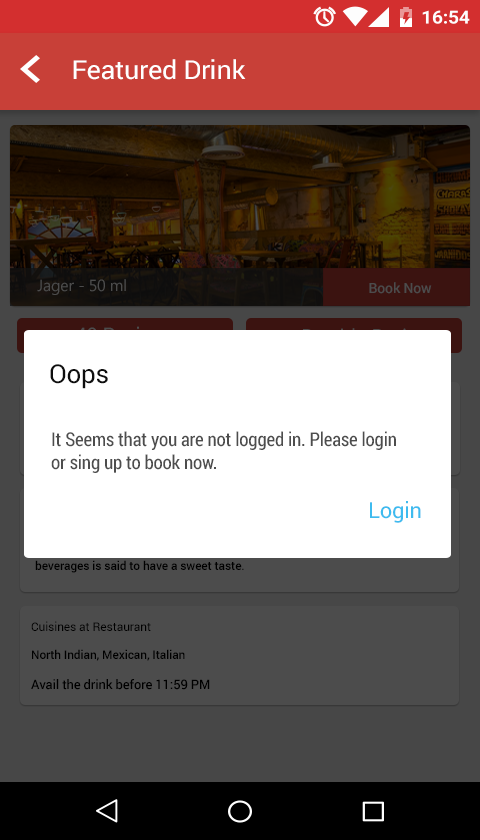
<style>
.page{position:relative;width:480px;height:840px;background:#ffffff}
.page>*{position:absolute;margin:0}
.t1{font:26.1px "Roboto-Regular";letter-spacing:-0.01em;color:#ffffff;scale:1.03 1}
.t2{font:20px "Roboto-Regular";letter-spacing:-0.01em;color:#ffffff}
.t3{font:26px "Roboto-Regular";letter-spacing:-0.01em;color:#0f0f0f}
.t4{font:19px "RobotoCondensed-Regular";letter-spacing:-0.01em;color:#4d4d4d}
.t5{font:12px "Roboto-Medium";letter-spacing:-0.01em;color:#000000}
.t6{font:14px "Roboto-Regular";letter-spacing:-0.01em;color:#000000;font-weight:bold}
.t7{font:22px "Roboto-Regular";letter-spacing:-0.01em;color:#3fbcef}
.t8{font:13px "Roboto-Medium";letter-spacing:-0.01em;color:#000000}
.t9{font:12px "Roboto-Regular";letter-spacing:-0.01em;color:#000000}
</style>
<div class="page">
<p class="t1" style="left:73px;top:59px;width:173px;height:21px">Featured Drink</p>
<p class="t2" style="left:76px;top:326px;width:100px;height:17px">40 Reviews</p>
<p class="t3" style="left:50px;top:364px;width:58px;height:25px">Oops</p>
<p class="t4" style="left:51px;top:431px;width:345px;height:42px">It Seems that you are not logged in. Please login <br>or sing up to book now.</p>
<p class="t5" style="left:35px;top:501px;width:313px;height:72px"><span class="t6">Description<br></span><br>Its composition consists of alcohol, sugar cane, sugar beet, <br>herbs and spices. In contrast to the composition, the <br>beverages is said to have a sweet taste.</p>
<p class="t7" style="left:370px;top:501px;width:51px;height:22px">Login</p>
<p class="t8" style="left:31px;top:621px;width:179px;height:69px"><span class="t9"><br>Cuisines at Restaurant<br></span><span class="t5"><br>North Indian, Mexican, Italian<br><br></span>Avail the drink before 11:59 PM</p>
</div>
